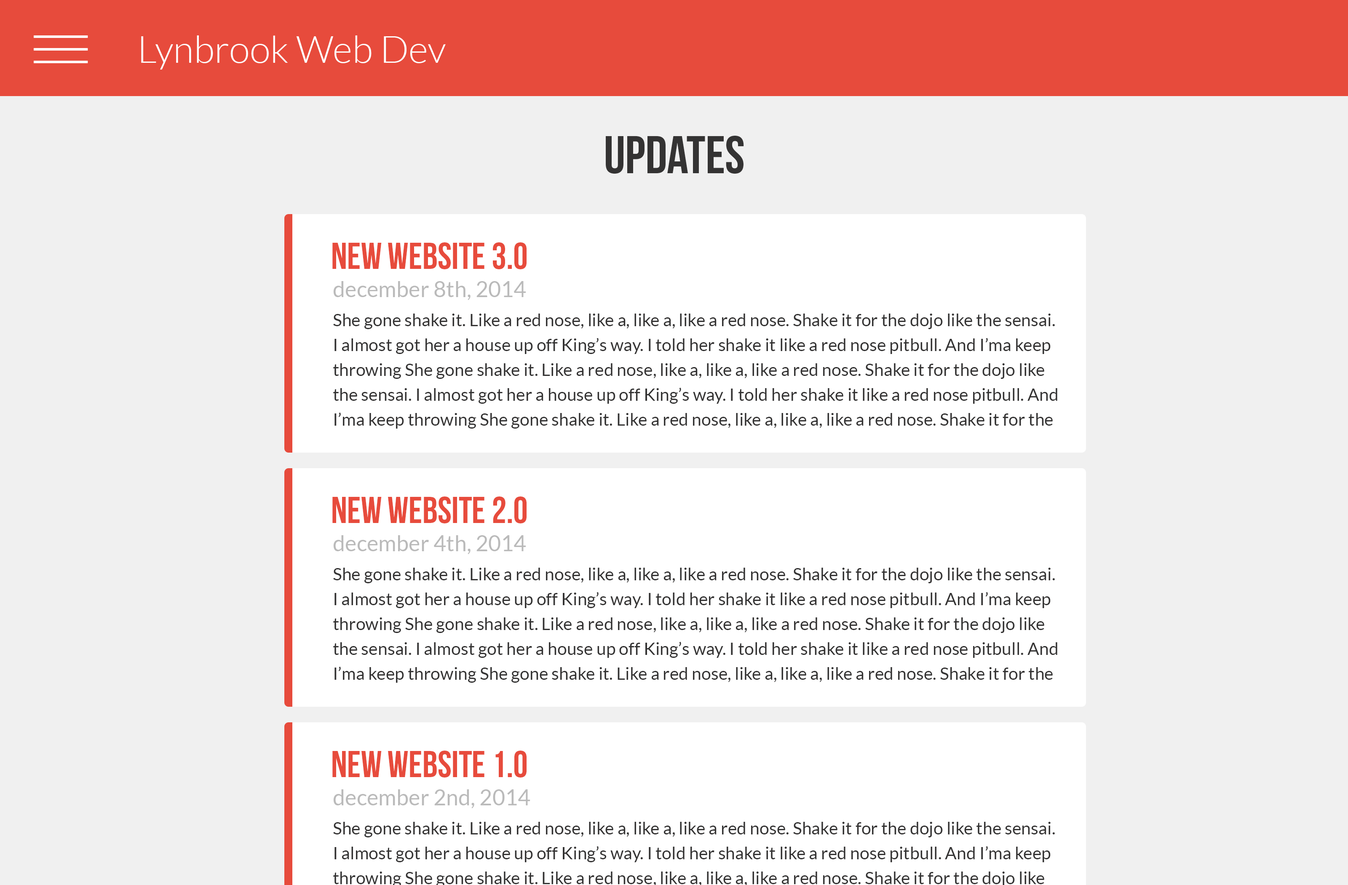
<style>
.page{position:relative;width:1348px;height:885px;background:#f0f0f0}
.page>*{position:absolute;margin:0}
.t1{font:68.7px "Lato-Light";color:#ffffff}
.t2{font:37.7px "Lato-Light";color:#ffffff}
.t3{font:53.2px "BebasNeue";color:#343333}
.t4{font:37.4px "BebasNeue";color:#e74b3c}
.t5{font:22px "Lato-Regular";color:#bababa}
.t6{font:17.3px/24.9px "Lato-Regular";color:#343333}
</style>
<div class="page">
<p class="t1" style="left:34px;top:35px;width:54px;height:3px">__</p>
<p class="t2" style="left:141px;top:35px;width:305px;height:35px">Lynbrook Web Dev</p>
<p class="t1" style="left:34px;top:48px;width:54px;height:3px">__</p>
<p class="t1" style="left:34px;top:61px;width:54px;height:2px">__</p>
<p class="t3" style="left:606px;top:135px;width:138px;height:39px">Updates</p>
<p class="t4" style="left:332px;top:242px;width:195px;height:27px">new website 3.0</p>
<p class="t5" style="left:333px;top:281px;width:193px;height:19px">december 8th, 2014</p>
<p class="t6" style="left:333px;top:313px;width:724px;height:115px">She gone shake it. Like a red nose, like a, like a, like a red nose. Shake it for the dojo like the sensai. I almost got her a house up off King’s way. I told her shake it like a red nose pitbull. And I’ma keep throwing She gone shake it. Like a red nose, like a, like a, like a red nose. Shake it for the dojo like the sensai. I almost got her a house up off King’s way. I told her shake it like a red nose pitbull. And I’ma keep throwing She gone shake it. Like a red nose, like a, like a, like a red nose. Shake it for the dojo like the sensai. I almost got her a house up off King’s way. I told her shake it like a red nose pitbull. And I’ma keep throwing</p>
<p class="t4" style="left:332px;top:496px;width:195px;height:27px">new website 2.0</p>
<p class="t5" style="left:333px;top:535px;width:193px;height:19px">december 4th, 2014</p>
<p class="t6" style="left:333px;top:567px;width:724px;height:115px">She gone shake it. Like a red nose, like a, like a, like a red nose. Shake it for the dojo like the sensai. I almost got her a house up off King’s way. I told her shake it like a red nose pitbull. And I’ma keep throwing She gone shake it. Like a red nose, like a, like a, like a red nose. Shake it for the dojo like the sensai. I almost got her a house up off King’s way. I told her shake it like a red nose pitbull. And I’ma keep throwing She gone shake it. Like a red nose, like a, like a, like a red nose. Shake it for the dojo like the sensai. I almost got her a house up off King’s way. I told her shake it like a red nose pitbull. And I’ma keep throwing</p>
<p class="t4" style="left:332px;top:750px;width:195px;height:27px">new website 1.0</p>
<p class="t5" style="left:333px;top:789px;width:197px;height:19px">december 2nd, 2014</p>
</div>
